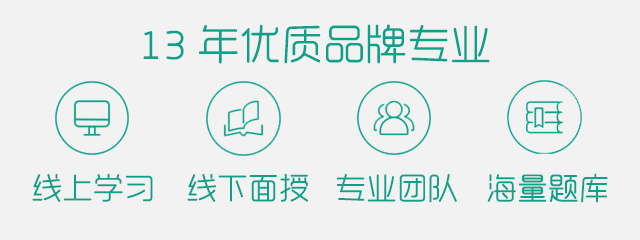
<style>
.page{position:relative;width:640px;height:240px;background:#f2f2f2}
.page>*{position:absolute;margin:0}
.t1{font:40px "RTWSYueGoTrial-ExLight";letter-spacing:0.025em;color:#0da18a;font-weight:bold}
.t2{font:29.3px "RTWSYueGoTrial-ExLight";letter-spacing:0.025em;color:#0da18a;font-weight:bold}
</style>
<div class="page">
<p class="t1" style="left:143px;top:24px;width:347px;height:40px">13年优质品牌专业</p>
<p class="t2" style="left:32px;top:173px;width:121px;height:29px">线上学习</p>
<p class="t2" style="left:187px;top:173px;width:121px;height:29px">线下面授</p>
<p class="t2" style="left:337px;top:174px;width:120px;height:29px">专业团队</p>
<p class="t2" style="left:487px;top:173px;width:121px;height:30px">海量题库</p>
</div>
